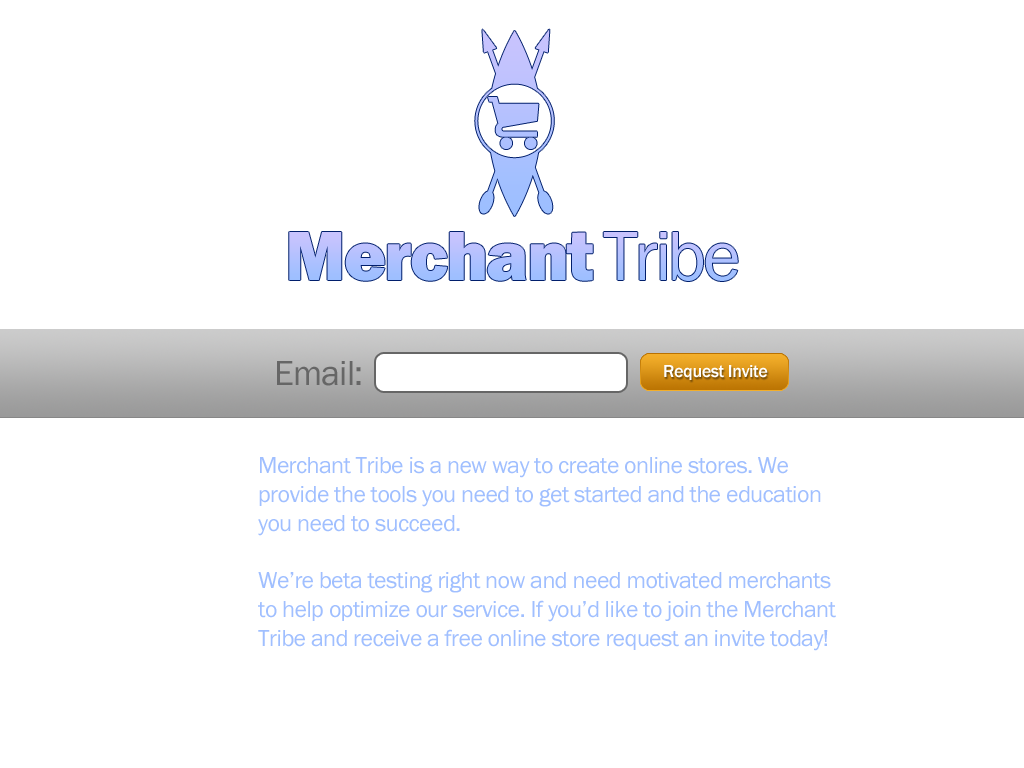
<style>
.page{position:relative;width:1024px;height:768px;background:#ffffff}
.page>*{position:absolute;margin:0}
.t1{font:36px "FranklinGothic-Book";letter-spacing:-0.025em;color:#666666}
.t2{font:18px "FranklinGothic-Medium";letter-spacing:-0.025em;color:#ffffff}
.t3{font:24px "FranklinGothic-Book";letter-spacing:-0.025em;color:#a0bfff}
</style>
<div class="page">
<p class="t1" style="left:277px;top:361px;width:84px;height:25px">Email:</p>
<p class="t2" style="left:664px;top:365px;width:104px;height:15px">Request Invite</p>
<p class="t3" style="left:258px;top:457px;width:578px;height:194px">Merchant Tribe is a new way to create online stores. We<br>provide the tools you need to get started and the education<br>you need to succeed.<br><br>We’re beta testing right now and need motivated merchants<br>to help optimize our service. If you’d like to join the Merchant<br>Tribe and receive a free online store request an invite today!</p>
</div>
